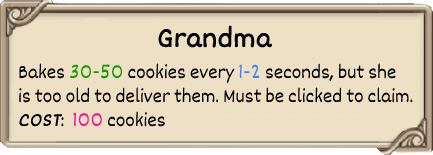
<style>
.page{position:relative;width:433px;height:155px;background:#ede0c4}
.page>*{position:absolute;margin:0}
.t1{font:30px "Dekko";color:#000000;font-weight:bold}
.t2{font:20px "Dekko";color:#000000}
.t3{font:20px "Dekko";color:#1b9902}
.t4{font:20px "Dekko";color:#4086fa}
.t5{font:20px "Dekko";color:#000000;font-weight:bold;font-style:italic}
.t6{font:20px "Dekko";color:#f0129a}
</style>
<div class="page">
<p class="t1" style="left:158px;top:25px;width:115px;height:23px">Grandma</p>
<p class="t2" style="left:19px;top:63px;width:394px;height:64px">Bakes <span class="t3">30-50 </span>cookies every <span class="t4">1-2 </span>seconds, but she <br>is too old to deliver them. Must be clicked to claim.<br><span class="t5">COST</span>:  <span class="t6">100 </span>cookies</p>
</div>
